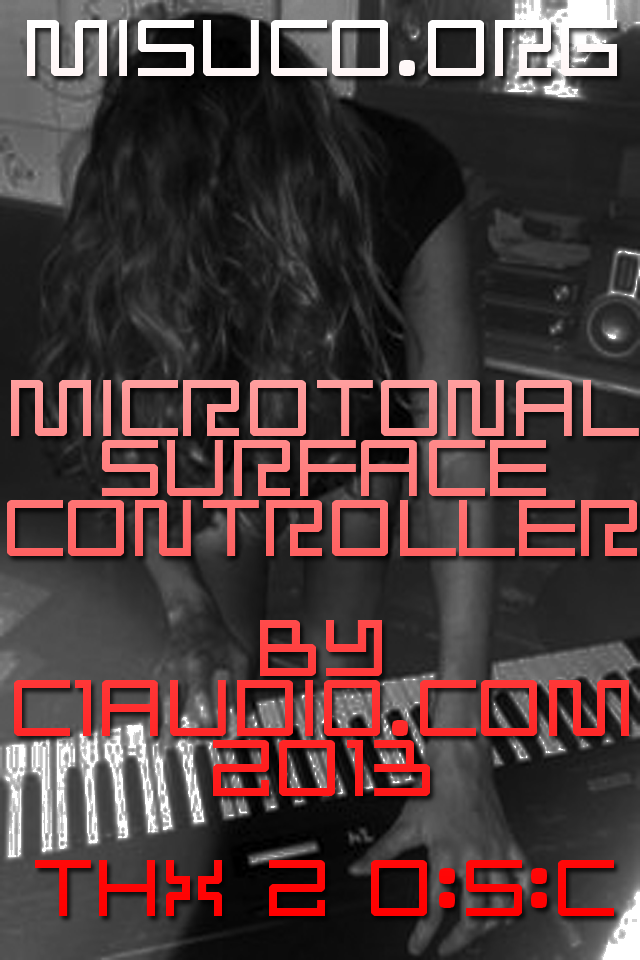
<style>
.page{position:relative;width:640px;height:960px}
.page>*{position:absolute;margin:0}
.t1{font:72px/60px "Radioaktivitet"}
</style>
<div class="page">
<p class="t1" style="left:7px;top:20px;width:632px;height:896px;text-align:center">MISUCO.ORG<br><br><br><br><br><br>MICROTONAL<br>SURFACE<br>CONTROLLER<br><br>BY<br>C1AUDIO.COM<br>2013<br><br>THX 2 O:S:C</p>
</div>
